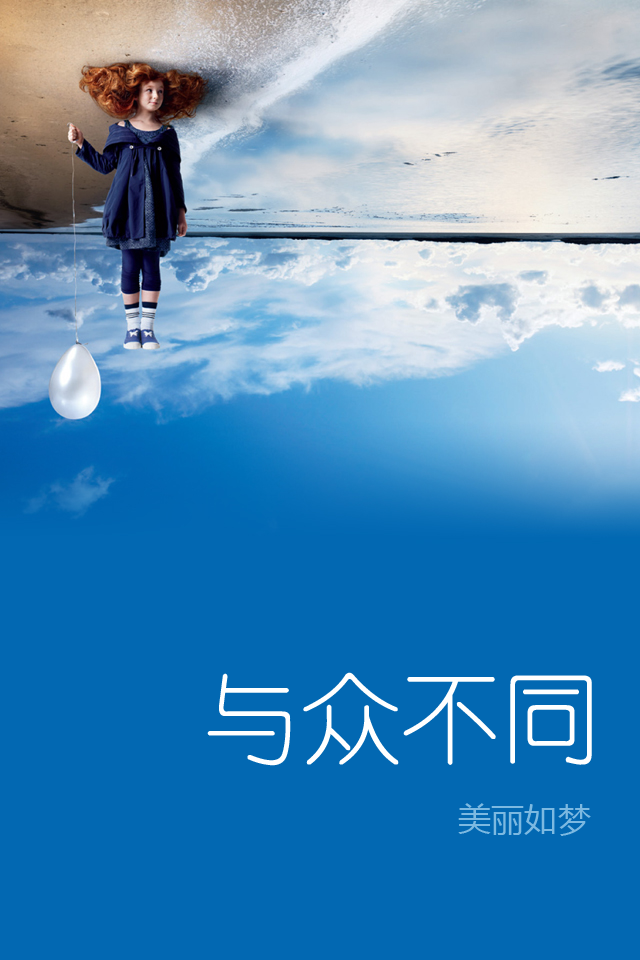
<style>
.page{position:relative;width:640px;height:960px;background:#0268b2}
.page>*{position:absolute;margin:0}
.t1{font:100px "YouYuan";color:#ffffff}
.t2{font:33.3px "MicrosoftYaHei";color:#7cb9e1}
</style>
<div class="page">
<p class="t1" style="left:207px;top:672px;width:385px;height:94px">与众不同</p>
<p class="t2" style="left:458px;top:803px;width:133px;height:33px">美丽如梦</p>
</div>
